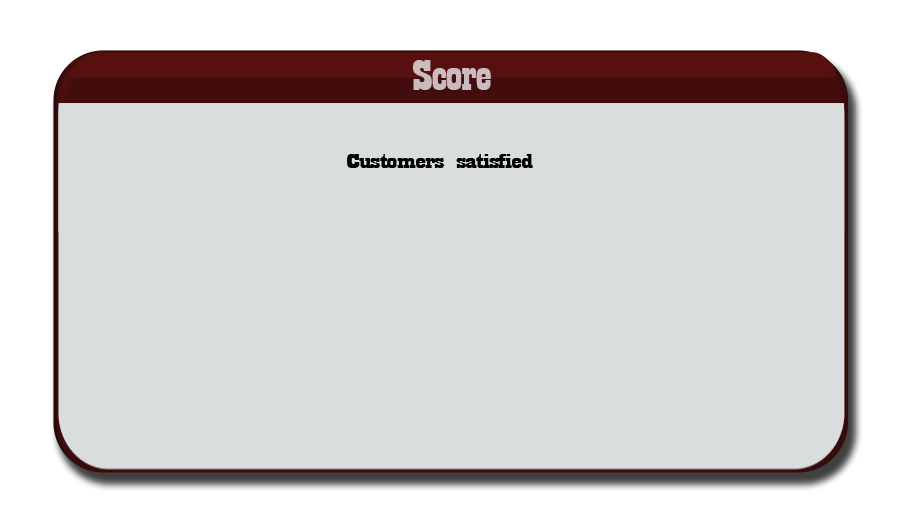
<style>
.page{position:relative;width:910px;height:512px;background:#daddde}
.page>*{position:absolute;margin:0}
.t1{font:44.6px "Playbill";letter-spacing:-0.025em;color:#cabbbe;scale:1.61 1}
.t2{font:21px "Playbill";letter-spacing:-0.025em;color:#020200;scale:2.24 1}
</style>
<div class="page">
<p class="t1" style="left:412px;top:60px;width:79px;height:30px">Score</p>
<p class="t2" style="left:347px;top:154px;width:186px;height:14px">Customers satisfied</p>
</div>
